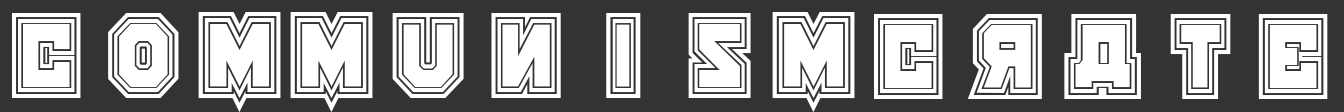
<style>
.page{position:relative;width:1344px;height:112px;background:#333333}
.page>*{position:absolute;margin:0}
.t1{font:125px "KalinkaCollege-Regular";color:#ffffff}
</style>
<div class="page">
<p class="t1" style="left:12px;top:13px;width:69px;height:85px">C</p>
<p class="t1" style="left:108px;top:13px;width:71px;height:85px">O</p>
<p class="t1" style="left:198px;top:12px;width:83px;height:100px">M</p>
<p class="t1" style="left:290px;top:12px;width:83px;height:100px">M</p>
<p class="t1" style="left:392px;top:13px;width:72px;height:85px">U</p>
<p class="t1" style="left:491px;top:13px;width:70px;height:85px">N</p>
<p class="t1" style="left:606px;top:13px;width:35px;height:85px">I</p>
<p class="t1" style="left:688px;top:13px;width:63px;height:85px">S</p>
<p class="t1" style="left:772px;top:12px;width:83px;height:100px">M</p>
<p class="t1" style="left:874px;top:14px;width:69px;height:85px">C</p>
<p class="t1" style="left:967px;top:14px;width:75px;height:85px">R</p>
<p class="t1" style="left:1064px;top:14px;width:77px;height:85px">A</p>
<p class="t1" style="left:1170px;top:14px;width:61px;height:85px">T</p>
<p class="t1" style="left:1258px;top:14px;width:70px;height:85px">E</p>
</div>
